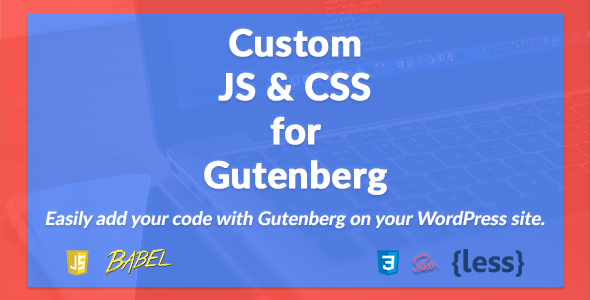
<style>
.page{position:relative;width:590px;height:300px}
.page>*{position:absolute;margin:0}
.t1{font:36.9px "Lato-Heavy";color:#ffffff;font-weight:bold}
.t2{font:18.4px "Lato-Heavy";color:#ffffff;font-style:italic}
</style>
<div class="page">
<p class="t1" style="left:204px;top:28px;width:183px;height:167px;text-align:center">Custom<br>JS &amp; CSS<br>for<br>Gutenberg</p>
<p class="t2" style="left:45px;top:211px;width:500px;height:18px">Easily add your code with Gutenberg on your WordPress site.</p>
</div>
